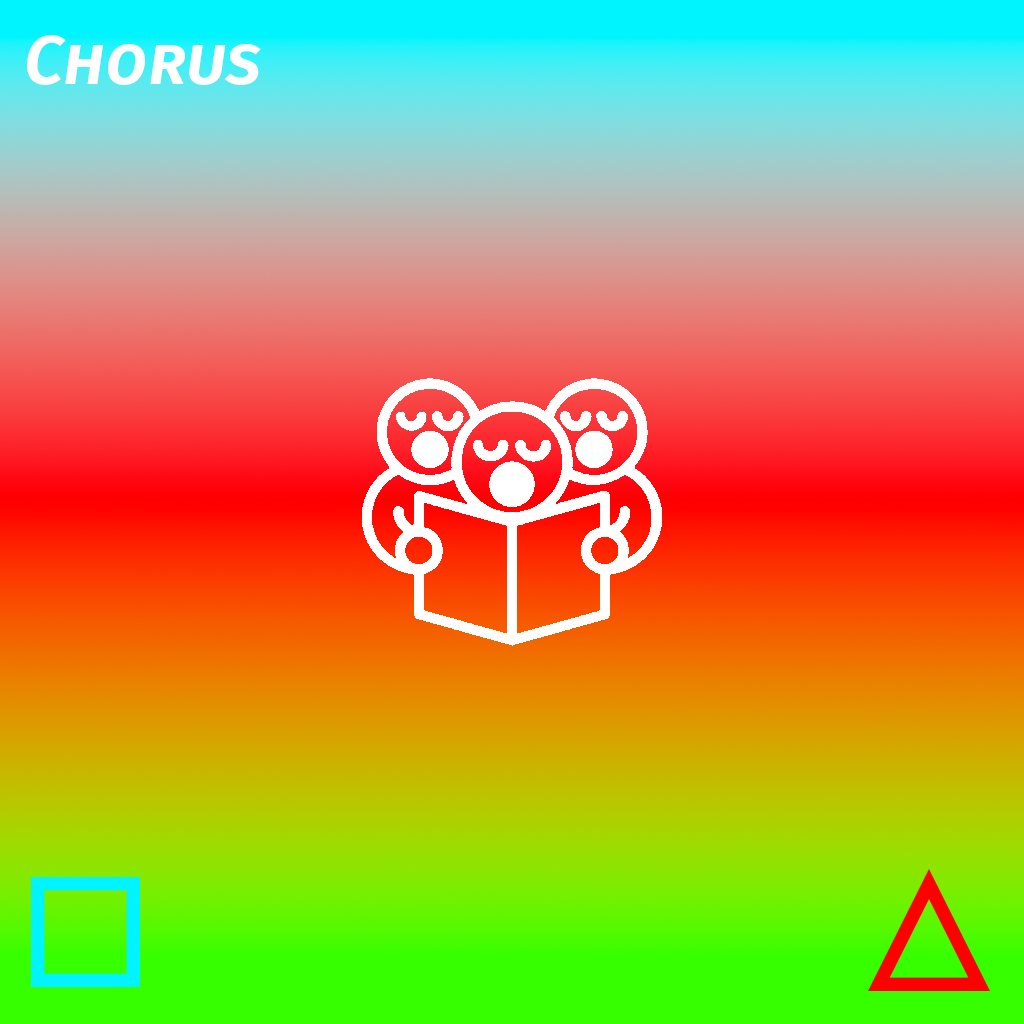
<style>
.page{position:relative;width:1024px;height:1024px}
.page>*{position:absolute;margin:0}
.t1{font:70px "FiraSans-SemiBoldItalic";color:#fffefe;font-variant:small-caps}
</style>
<div class="page">
<p class="t1" style="left:27px;top:35px;width:234px;height:50px">Chorus</p>
</div>
